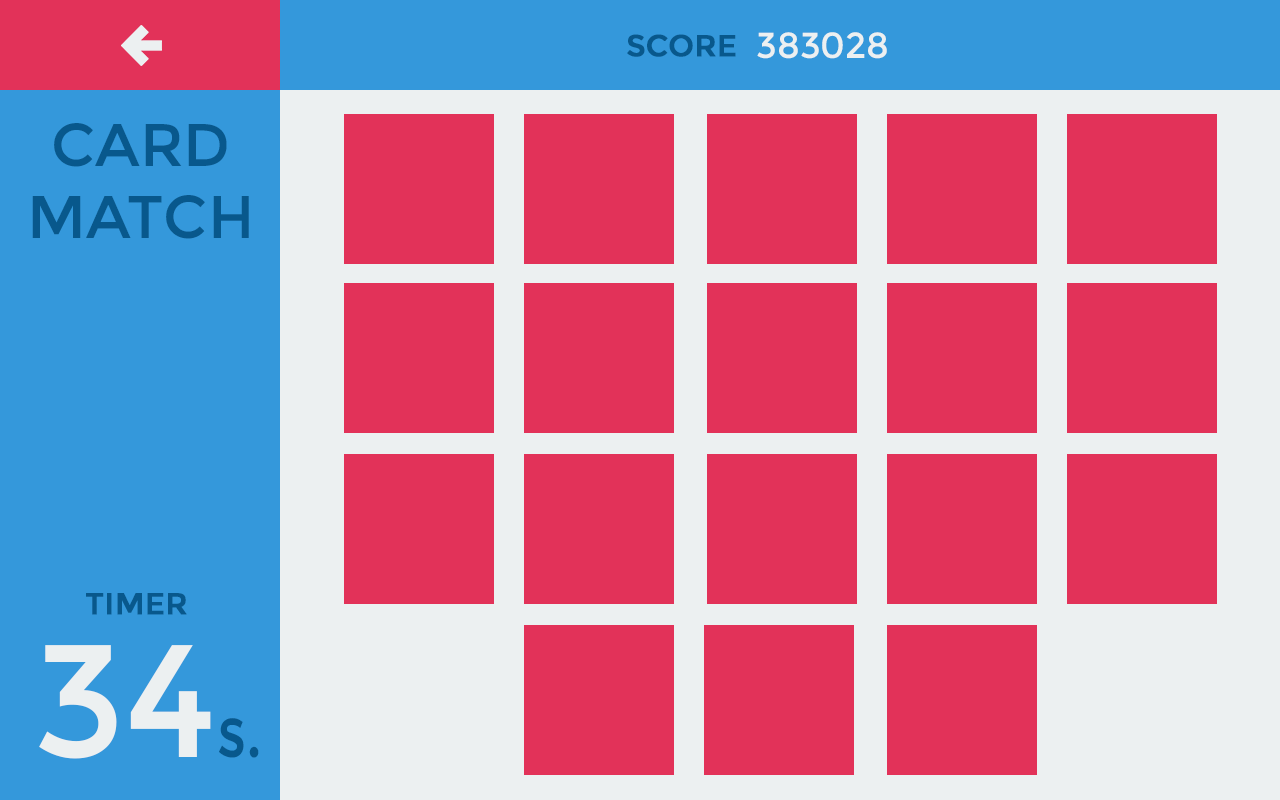
<style>
.page{position:relative;width:1280px;height:800px;background:#e23259}
.page>*{position:absolute;margin:0}
.t1{font:30px "Montserrat-Regular";color:#08588c;font-weight:bold}
.t2{font:36px "Montserrat-Regular";color:#ecf0f1}
.t3{font:60px "Montserrat-Regular";color:#08588c}
.t4{font:160px "Montserrat-Regular";color:#ecf0f1}
.t5{font:72px "Montserrat-Regular";color:#08588c;scale:0.8 1}
</style>
<div class="page">
<p class="t1" style="left:627px;top:34px;width:109px;height:23px">SCORE</p>
<p class="t2" style="left:757px;top:32px;width:130px;height:27px">383028</p>
<p class="t3" style="left:32px;top:123px;width:217px;height:116px;text-align:center">CARD<br>MATCH</p>
<p class="t1" style="left:86px;top:593px;width:101px;height:22px">TIMER</p>
<p class="t4" style="left:39px;top:645px;width:172px;height:114px">34</p>
<p class="t5" style="left:219px;top:718px;width:40px;height:40px">s.</p>
</div>
